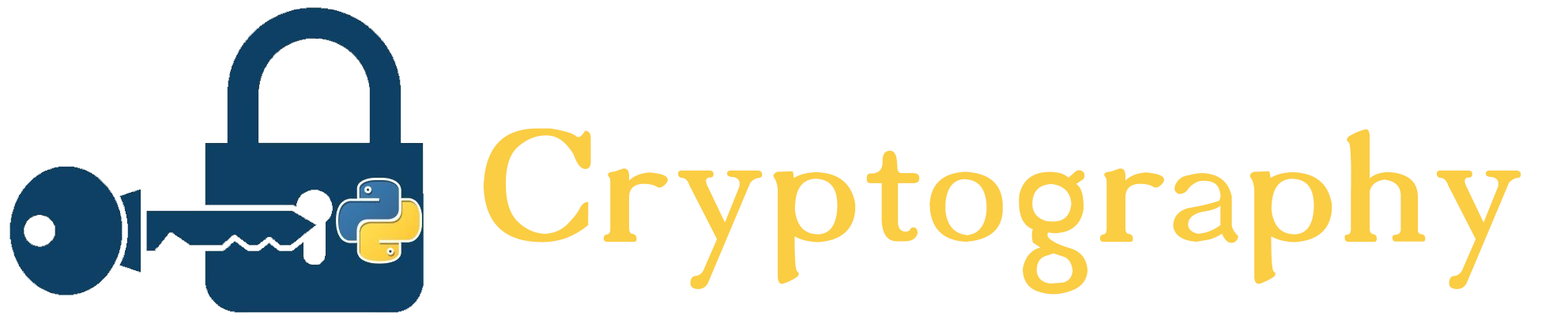
<style>
.page{position:relative;width:1568px;height:316px;background:#ffffff}
.page>*{position:absolute;margin:0}
.t1{font:224px "18thCentury";color:#facd43}
</style>
<div class="page">
<p class="t1" style="left:483px;top:128px;width:1038px;height:167px">Cryptography</p>
</div>
